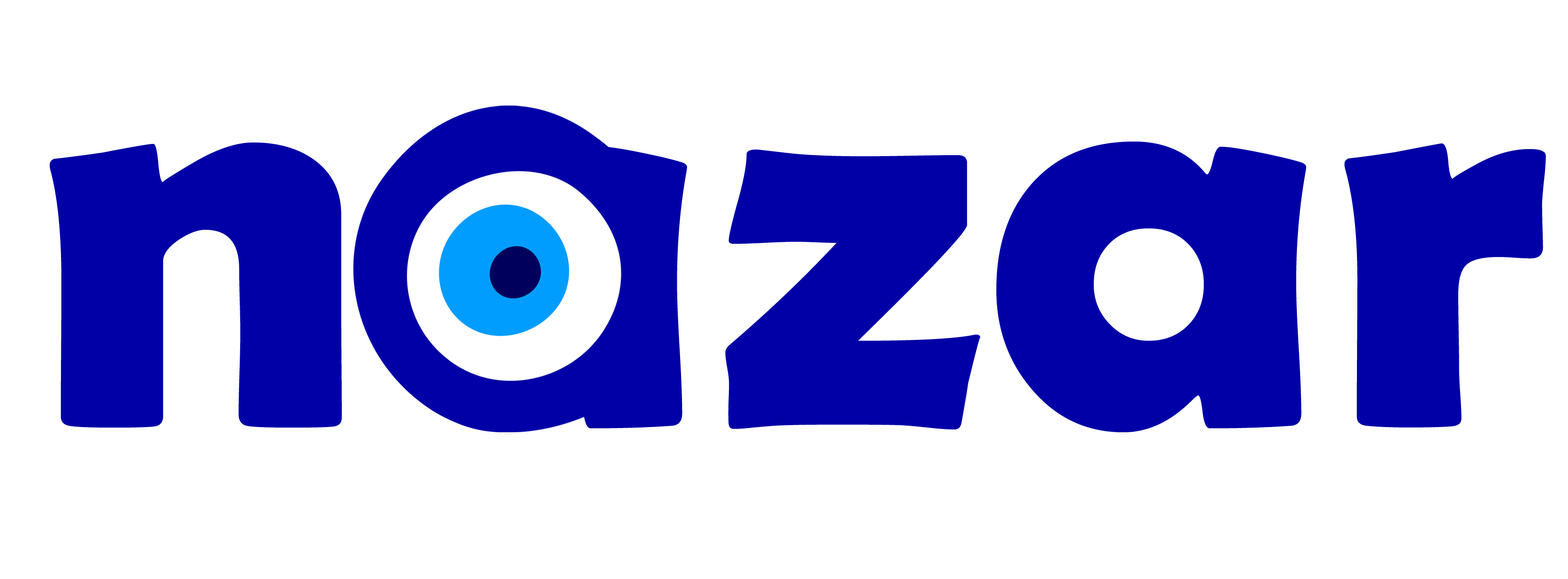
<style>
.page{position:relative;width:1568px;height:579px;background:#ffffff}
.page>*{position:absolute;margin:0}
.t1{font:586.3px "BerlinSansFBDemi-Bold";color:#0000a6}
</style>
<div class="page">
<p class="t1" style="left:50px;top:141px;width:1496px;height:291px">nazar</p>
</div>
